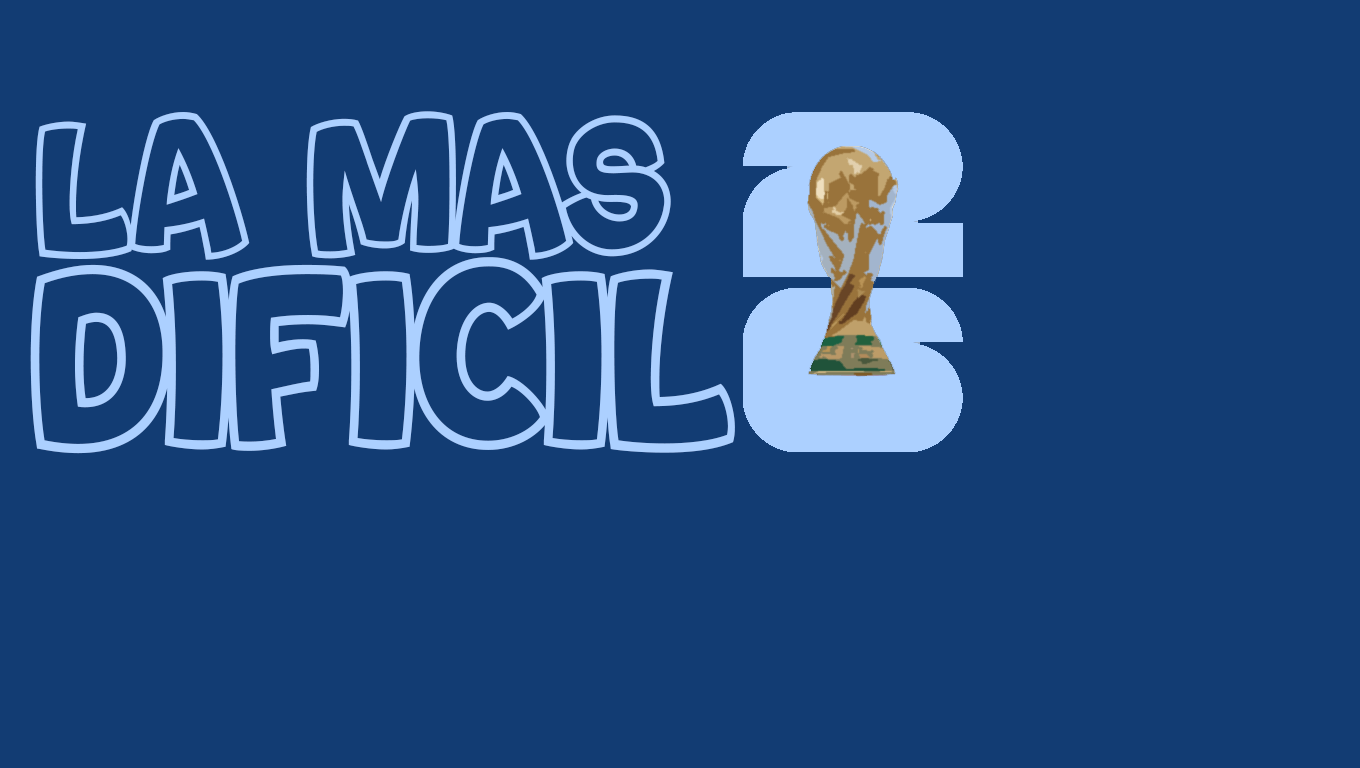
<style>
.page{position:relative;width:1360px;height:768px;background:#123c73}
.page>*{position:absolute;margin:0}
.t1{font:227.8px/185.2px "Bouncy-PERSONALUSEONLY";letter-spacing:0.02em;color:#acd0ff;scale:0.92 1}
.t2{font:170.8px/185.2px "Bouncy-PERSONALUSEONLY";letter-spacing:0.02em;color:#acd0ff;scale:0.92 1}
</style>
<div class="page">
<p class="t1" style="left:30px;top:111px;width:705px;height:343px;text-align:center"><span class="t2">la mas <br></span>dificil</p>
</div>
